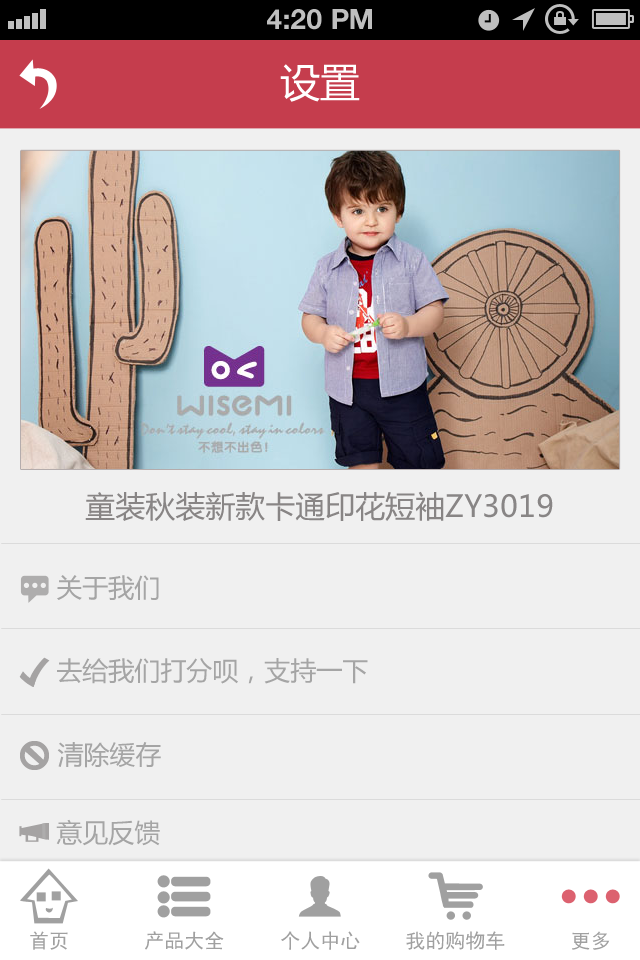
<style>
.page{position:relative;width:640px;height:960px;background:#f0f0f0}
.page>*{position:absolute;margin:0}
.t1{font:28px "HelveticaNeue-Bold";color:#bfbfbf;text-transform:uppercase}
.t2{font:40px "MicrosoftYaHei";color:#ffffff;text-transform:uppercase}
.t3{font:30px "MicrosoftYaHei";color:#888585}
.t4{font:26px "MicrosoftYaHei";color:#a5a5a5;text-transform:uppercase}
.t5{font:20px "SimHei";color:#a0a0a0}
</style>
<div class="page">
<p class="t1" style="left:267px;top:9px;width:105px;height:21px">4:20 PM</p>
<p class="t2" style="left:280px;top:64px;width:80px;height:38px">设置</p>
<p class="t3" style="left:85px;top:491px;width:468px;height:30px">童装秋装新款卡通印花短袖ZY3019</p>
<p class="t4" style="left:57px;top:575px;width:102px;height:25px">关于我们</p>
<p class="t4" style="left:57px;top:658px;width:311px;height:26px">去给我们打分呗，支持一下</p>
<p class="t4" style="left:57px;top:742px;width:104px;height:26px">清除缓存</p>
<p class="t4" style="left:56px;top:819px;width:104px;height:27px">意见反馈</p>
<p class="t5" style="left:30px;top:931px;width:38px;height:19px">首页</p>
<p class="t5" style="left:145px;top:931px;width:79px;height:19px">产品大全</p>
<p class="t5" style="left:281px;top:931px;width:79px;height:19px">个人中心</p>
<p class="t5" style="left:406px;top:931px;width:99px;height:19px">我的购物车</p>
<p class="t5" style="left:572px;top:931px;width:38px;height:19px">更多</p>
</div>
